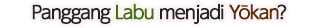
<style>
.page{position:relative;width:318px;height:28px;background:#ffffff}
.page>*{position:absolute;margin:0}
.t1{font:18px "UDShinGoPro-Regular";letter-spacing:-0.08em;color:#232320;font-weight:bold}
.t2{font:18px "UDShinGoPro-Regular";letter-spacing:-0.08em;color:#3a7103;font-weight:bold}
.t3{font:18px "UDShinGoPro-Regular";letter-spacing:-0.08em;color:#592b00;font-weight:bold}
</style>
<div class="page">
<p class="t1" style="left:32px;top:4px;width:255px;height:20px">Panggang <span class="t2">Labu</span> menjadi <span class="t3">Yōkan</span>?</p>
</div>
